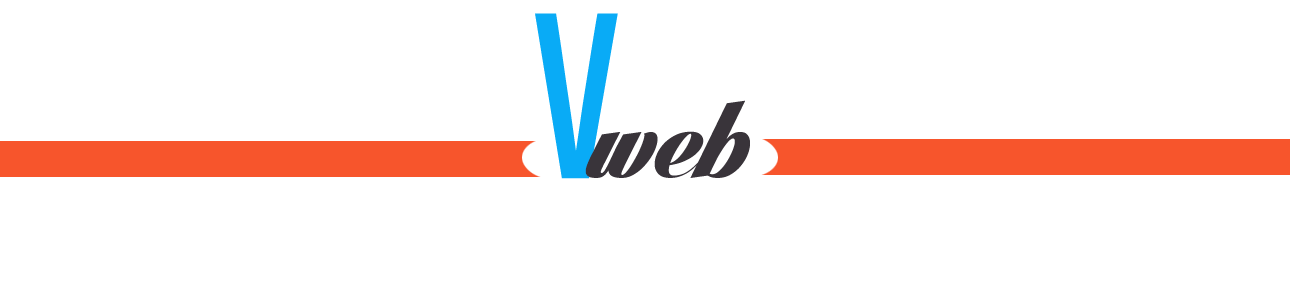
<style>
.page{position:relative;width:1290px;height:300px;background:#ffffff}
.page>*{position:absolute;margin:0}
.t1{font:199.9px "SteelfishRg-Regular";color:#09abf6;scale:1.32 1}
.t2{font:114.7px "LighthousePersonalUse";color:#39343a}
</style>
<div class="page">
<p class="t1" style="left:535px;top:13px;width:83px;height:166px">V</p>
<p class="t2" style="left:585px;top:100px;width:165px;height:78px">web</p>
</div>
